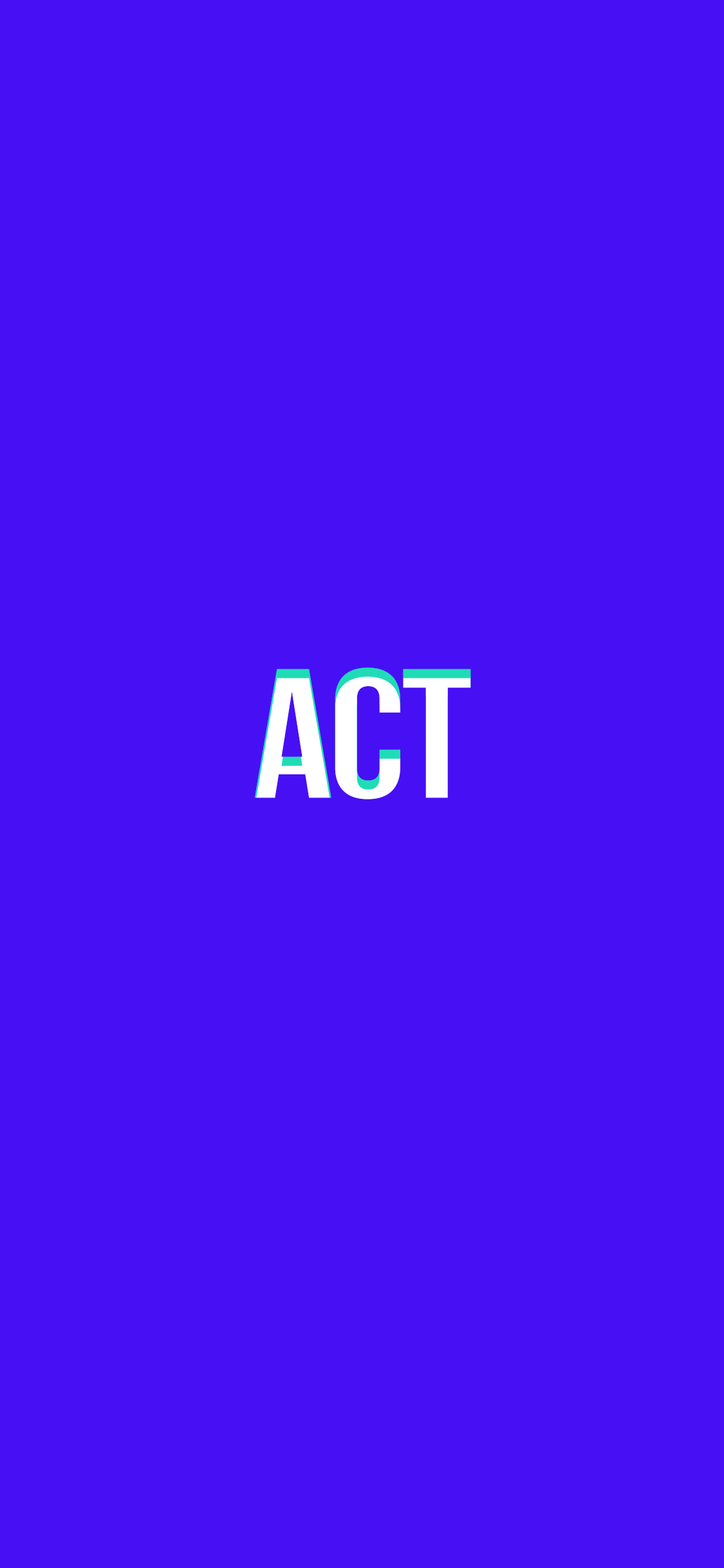
<style>
.page{position:relative;width:724px;height:1568px;background:#470ff4}
.page>*{position:absolute;margin:0}
.t1{font:183.4px "BebasNeue";letter-spacing:-0.02em;color:#ffffff;scale:1.08 1}
</style>
<div class="page">
<p class="t1" style="left:255px;top:667px;width:216px;height:132px">act</p>
</div>
